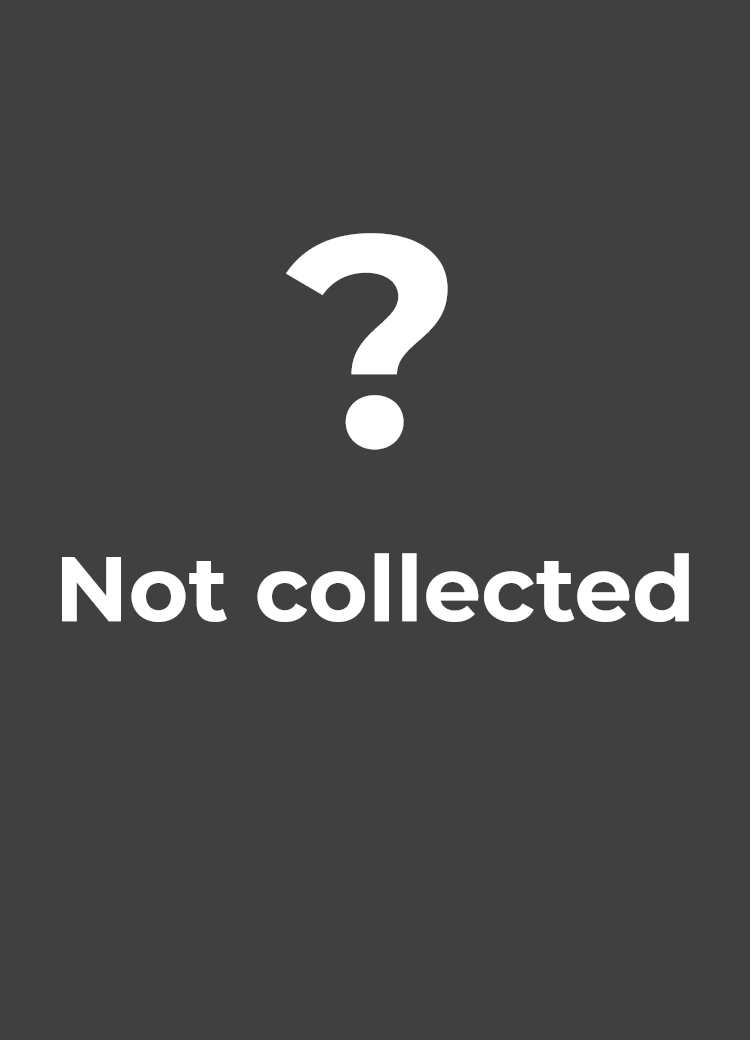
<style>
.page{position:relative;width:750px;height:1040px;background:#404040}
.page>*{position:absolute;margin:0}
.t1{font:300px "Montserrat-Bold";color:#ffffff}
.t2{font:91.7px "Montserrat-Bold";color:#ffffff}
</style>
<div class="page">
<p class="t1" style="left:286px;top:233px;width:162px;height:217px">?</p>
<p class="t2" style="left:62px;top:553px;width:627px;height:69px">Not collected</p>
</div>
